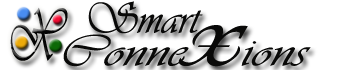
<style>
.page{position:relative;width:350px;height:70px;background:#ffffff}
.page>*{position:absolute;margin:0}
.t1{font:45px "Vivaldii";color:#090908}
.t2{font:75.2px "Vivaldii";color:#090908;scale:0.58 1}
.t3{font:45px "Vivaldii";color:#090908;scale:1.28 1}
.t4{font:100px "Vivaldii";color:#090908;scale:1.28 1}
</style>
<div class="page">
<p class="t1" style="left:88px;top:1px;width:115px;height:33px">Smart</p>
<p class="t2" style="left:10px;top:7px;width:58px;height:54px">X</p>
<p class="t3" style="left:63px;top:25px;width:248px;height:42px">Conne<span class="t4">x</span>ions</p>
</div>
